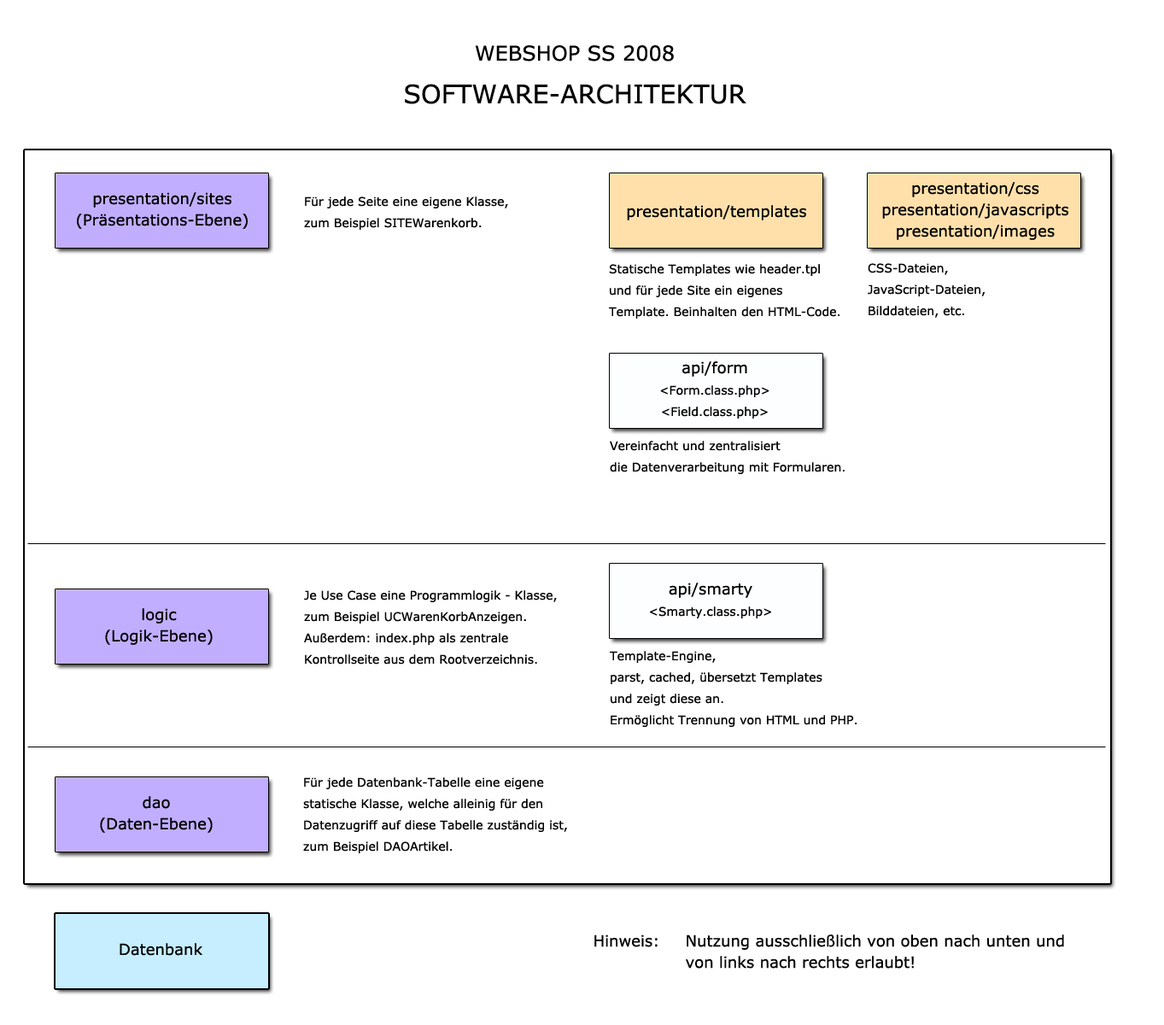
<style>
.page{position:relative;width:1164px;height:1025px;background:#ffffff}
.page>*{position:absolute;margin:0}
.t1{font:25.6px/21.3px "MSReferenceSansSerif";letter-spacing:0.001em;color:#000000}
.t2{font:20.5px/21.3px "MSReferenceSansSerif";letter-spacing:0.001em;color:#000000}
.t3{font:15.4px/21.3px "MSReferenceSansSerif";letter-spacing:0.001em;color:#000000}
.t4{font:12px/21.3px "MSReferenceSansSerif";letter-spacing:0.001em;color:#000000}
.t5{font:15.4px "MSReferenceSansSerif";letter-spacing:0.001em;color:#000000}
</style>
<div class="page">
<p class="t1" style="left:405px;top:45px;width:341px;height:59px;text-align:center"><span class="t2">WEBSHOP SS 2008<br></span><br>SOFTWARE-ARCHITEKTUR</p>
<p class="t3" style="left:882px;top:182px;width:187px;height:58px;text-align:center">presentation/css<br>presentation/javascripts<br>presentation/images</p>
<p class="t3" style="left:77px;top:192px;width:171px;height:37px;text-align:center">presentation/sites<br>(Präsentations-Ebene)</p>
<p class="t4" style="left:304px;top:196px;width:204px;height:34px">Für jede Seite eine eigene Klasse,<br>zum Beispiel SITEWarenkorb.</p>
<p class="t5" style="left:627px;top:205px;width:179px;height:15px">presentation/templates</p>
<p class="t4" style="left:609px;top:264px;width:230px;height:54px">Statische Templates wie header.tpl<br>und für jede Site ein eigenes<br>Template. Beinhalten den HTML-Code.</p>
<p class="t4" style="left:868px;top:263px;width:117px;height:55px">CSS-Dateien,<br>JavaScript-Dateien,<br>Bilddateien, etc.</p>
<p class="t4" style="left:660px;top:361px;width:109px;height:57px;text-align:center"><span class="t3">api/form<br></span>&lt;Form.class.php&gt;<br>&lt;Field.class.php&gt;</p>
<p class="t4" style="left:610px;top:441px;width:234px;height:33px">Vereinfacht und zentralisiert<br>die Datenverarbeitung mit Formularen.</p>
<p class="t4" style="left:304px;top:590px;width:253px;height:74px">Je Use Case eine Programmlogik - Klasse,<br>zum Beispiel UCWarenKorbAnzeigen.<br>Außerdem: index.php als zentrale<br>Kontrollseite aus dem Rootverzeichnis.</p>
<p class="t4" style="left:650px;top:582px;width:121px;height:36px;text-align:center"><span class="t3">api/smarty<br></span>&lt;Smarty.class.php&gt;</p>
<p class="t3" style="left:105px;top:608px;width:108px;height:37px;text-align:center">logic<br>(Logik-Ebene)</p>
<p class="t4" style="left:610px;top:651px;width:246px;height:76px">Template-Engine,<br>parst, cached, übersetzt Templates<br>und zeigt diese an.<br>Ermöglicht Trennung von HTML und PHP.</p>
<p class="t4" style="left:303px;top:777px;width:264px;height:76px">Für jede Datenbank-Tabelle eine eigene<br>statische Klasse, welche alleinig für den<br>Datenzugriff auf diese Tabelle zuständig ist,<br>zum Beispiel DAOArtikel.</p>
<p class="t3" style="left:100px;top:796px;width:113px;height:36px;text-align:center">dao<br>(Daten-Ebene)</p>
<p class="t3" style="left:594px;top:934px;width:470px;height:34px">Hinweis:  Nutzung ausschließlich von oben nach unten und<br>   von links nach rechts erlaubt!</p>
<p class="t5" style="left:120px;top:943px;width:82px;height:12px">Datenbank</p>
</div>
